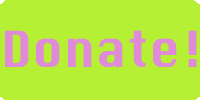
<style>
.page{position:relative;width:200px;height:100px;background:#b5f035}
.page>*{position:absolute;margin:0}
.t1{font:48.4px "Silom";color:#e08bd7;scale:0.97 1}
</style>
<div class="page">
<p class="t1" style="left:5px;top:30px;width:192px;height:37px">Donate!</p>
</div>
